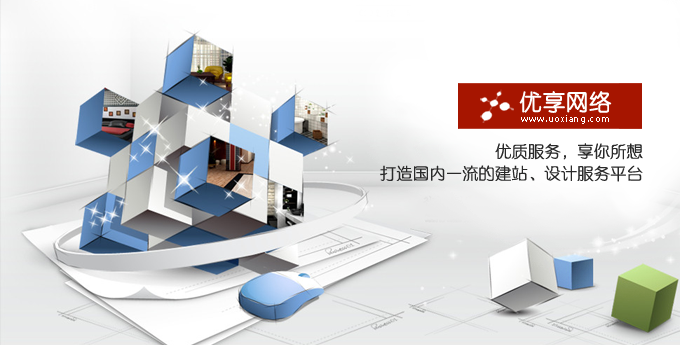
<style>
.page{position:relative;width:680px;height:345px}
.page>*{position:absolute;margin:0}
.t1{font:22.5px "YouYuan";color:#ffffff;font-weight:bold}
.t2{font:9.4px "Tahoma";letter-spacing:0.068em;color:#ffffff}
.t3{font:16px/22px "FZXQJW--GB1-0";color:#2a2a2a;font-weight:bold}
</style>
<div class="page">
<p class="t1" style="left:519px;top:91px;width:93px;height:22px">优享网络</p>
<p class="t2" style="left:521px;top:115px;width:88px;height:9px">www.uoxiang.com</p>
<p class="t3" style="left:380px;top:143px;width:263px;height:39px;text-align:right">优质服务，享你所想<br>打造国内一流的建站、设计服务平台</p>
</div>
